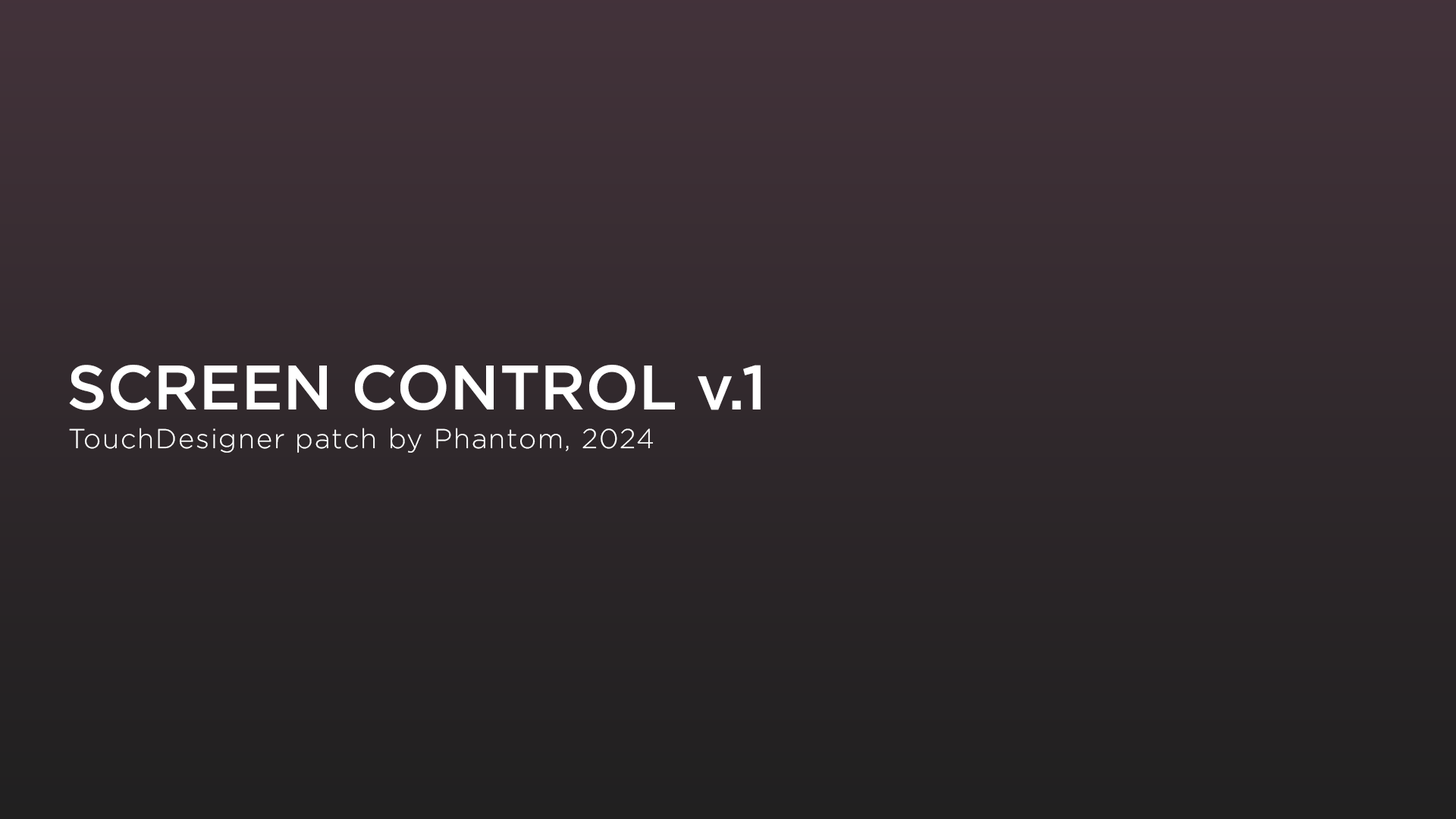
<style>
.page{position:relative;width:1456px;height:819px}
.page>*{position:absolute;margin:0}
.t1{font:62.8px "Gotham-Medium";color:#ffffff}
.t2{font:27.3px "Gotham-Light";letter-spacing:0.05em;color:#ffffff}
</style>
<div class="page">
<p class="t1" style="left:69px;top:365px;width:692px;height:45px">SCREEN CONTROL v.1</p>
<p class="t2" style="left:69px;top:428px;width:584px;height:25px">TouchDesigner patch by Phantom, 2024</p>
</div>
